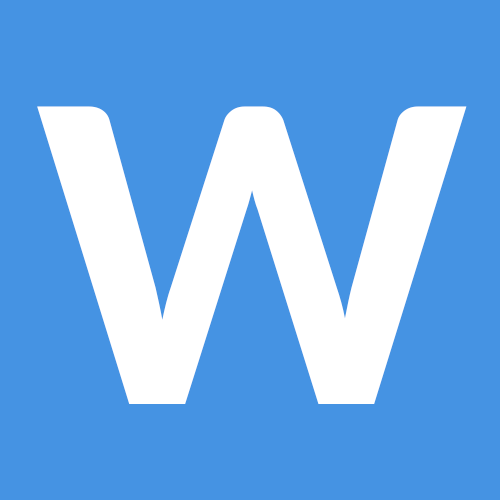
<style>
.page{position:relative;width:500px;height:500px;background:#4593e3}
.page>*{position:absolute;margin:0}
.t1{font:410px "Lato-Heavy";color:#ffffff}
</style>
<div class="page">
<p class="t1" style="left:37px;top:106px;width:430px;height:298px">W</p>
</div>
